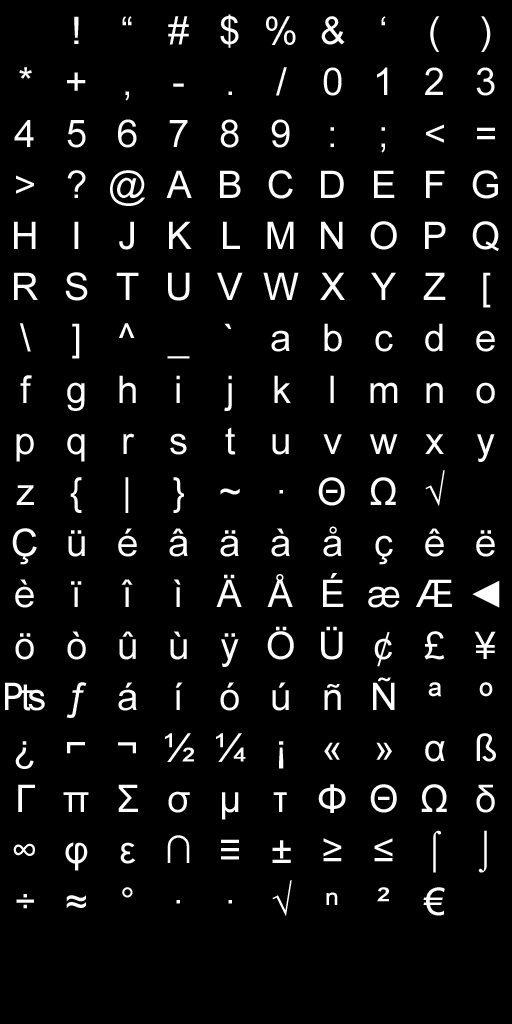
<style>
.page{position:relative;width:512px;height:1024px;background:#000000}
.page>*{position:absolute;margin:0}
.t1{font:38px "ArialMT";color:#ffffff}
</style>
<div class="page">
<p class="t1" style="left:74px;top:16px;width:5px;height:28px">!</p>
<p class="t1" style="left:122px;top:16px;width:10px;height:10px">“</p>
<p class="t1" style="left:168px;top:16px;width:21px;height:29px">#</p>
<p class="t1" style="left:220px;top:14px;width:19px;height:34px">$</p>
<p class="t1" style="left:266px;top:16px;width:30px;height:29px">%</p>
<p class="t1" style="left:321px;top:16px;width:24px;height:29px">&amp;</p>
<p class="t1" style="left:381px;top:16px;width:5px;height:10px">‘</p>
<p class="t1" style="left:430px;top:16px;width:10px;height:36px">(</p>
<p class="t1" style="left:481px;top:16px;width:10px;height:36px">)</p>
<p class="t1" style="left:19px;top:67px;width:13px;height:12px">*</p>
<p class="t1" style="left:67px;top:72px;width:19px;height:19px">+</p>
<p class="t1" style="left:276px;top:67px;width:11px;height:29px">/</p>
<p class="t1" style="left:323px;top:67px;width:19px;height:29px">0</p>
<p class="t1" style="left:377px;top:67px;width:11px;height:28px">1</p>
<p class="t1" style="left:425px;top:67px;width:18px;height:28px">2</p>
<p class="t1" style="left:476px;top:67px;width:19px;height:29px">3</p>
<p class="t1" style="left:173px;top:83px;width:11px;height:4px">-</p>
<p class="t1" style="left:125px;top:91px;width:4px;height:10px">,</p>
<p class="t1" style="left:228px;top:91px;width:4px;height:4px">.</p>
<p class="t1" style="left:14px;top:120px;width:20px;height:27px">4</p>
<p class="t1" style="left:67px;top:120px;width:19px;height:28px">5</p>
<p class="t1" style="left:118px;top:119px;width:19px;height:29px">6</p>
<p class="t1" style="left:169px;top:120px;width:19px;height:27px">7</p>
<p class="t1" style="left:220px;top:119px;width:19px;height:29px">8</p>
<p class="t1" style="left:271px;top:119px;width:19px;height:29px">9</p>
<p class="t1" style="left:426px;top:124px;width:18px;height:19px">&lt;</p>
<p class="t1" style="left:330px;top:127px;width:4px;height:20px">:</p>
<p class="t1" style="left:381px;top:127px;width:4px;height:26px">;</p>
<p class="t1" style="left:477px;top:127px;width:18px;height:13px">=</p>
<p class="t1" style="left:67px;top:170px;width:19px;height:28px">?</p>
<p class="t1" style="left:110px;top:170px;width:35px;height:36px">@</p>
<p class="t1" style="left:166px;top:170px;width:26px;height:28px">A</p>
<p class="t1" style="left:220px;top:170px;width:21px;height:28px">B</p>
<p class="t1" style="left:268px;top:170px;width:25px;height:29px">C</p>
<p class="t1" style="left:321px;top:170px;width:23px;height:28px">D</p>
<p class="t1" style="left:374px;top:170px;width:21px;height:28px">E</p>
<p class="t1" style="left:426px;top:170px;width:19px;height:28px">F</p>
<p class="t1" style="left:472px;top:170px;width:26px;height:29px">G</p>
<p class="t1" style="left:16px;top:175px;width:18px;height:19px">&gt;</p>
<p class="t1" style="left:14px;top:221px;width:22px;height:28px">H</p>
<p class="t1" style="left:74px;top:221px;width:5px;height:28px">I</p>
<p class="t1" style="left:119px;top:221px;width:15px;height:29px">J</p>
<p class="t1" style="left:169px;top:221px;width:23px;height:28px">K</p>
<p class="t1" style="left:223px;top:221px;width:17px;height:28px">L</p>
<p class="t1" style="left:267px;top:221px;width:27px;height:28px">M</p>
<p class="t1" style="left:321px;top:221px;width:22px;height:28px">N</p>
<p class="t1" style="left:370px;top:221px;width:27px;height:29px">O</p>
<p class="t1" style="left:425px;top:221px;width:21px;height:28px">P</p>
<p class="t1" style="left:472px;top:221px;width:27px;height:30px">Q</p>
<p class="t1" style="left:14px;top:272px;width:24px;height:28px">R</p>
<p class="t1" style="left:65px;top:272px;width:23px;height:29px">S</p>
<p class="t1" style="left:116px;top:272px;width:23px;height:28px">T</p>
<p class="t1" style="left:168px;top:272px;width:22px;height:29px">U</p>
<p class="t1" style="left:217px;top:272px;width:26px;height:28px">V</p>
<p class="t1" style="left:263px;top:272px;width:36px;height:28px">W</p>
<p class="t1" style="left:320px;top:272px;width:25px;height:28px">X</p>
<p class="t1" style="left:371px;top:272px;width:25px;height:28px">Y</p>
<p class="t1" style="left:423px;top:272px;width:23px;height:28px">Z</p>
<p class="t1" style="left:483px;top:272px;width:8px;height:36px">[</p>
<p class="t1" style="left:20px;top:323px;width:11px;height:29px">\</p>
<p class="t1" style="left:72px;top:323px;width:8px;height:36px">]</p>
<p class="t1" style="left:119px;top:323px;width:16px;height:15px">^</p>
<p class="t1" style="left:224px;top:323px;width:8px;height:6px">`</p>
<p class="t1" style="left:324px;top:323px;width:18px;height:29px">b</p>
<p class="t1" style="left:425px;top:323px;width:18px;height:29px">d</p>
<p class="t1" style="left:271px;top:330px;width:19px;height:22px">a</p>
<p class="t1" style="left:375px;top:330px;width:18px;height:22px">c</p>
<p class="t1" style="left:476px;top:330px;width:19px;height:22px">e</p>
<p class="t1" style="left:167px;top:356px;width:23px;height:3px">_</p>
<p class="t1" style="left:20px;top:375px;width:12px;height:28px">f</p>
<p class="t1" style="left:119px;top:375px;width:17px;height:28px">h</p>
<p class="t1" style="left:176px;top:375px;width:4px;height:28px">i</p>
<p class="t1" style="left:224px;top:375px;width:8px;height:36px">j</p>
<p class="t1" style="left:274px;top:375px;width:17px;height:28px">k</p>
<p class="t1" style="left:330px;top:375px;width:4px;height:28px">l</p>
<p class="t1" style="left:67px;top:382px;width:18px;height:29px">g</p>
<p class="t1" style="left:370px;top:382px;width:28px;height:21px">m</p>
<p class="t1" style="left:426px;top:382px;width:17px;height:21px">n</p>
<p class="t1" style="left:476px;top:382px;width:19px;height:22px">o</p>
<p class="t1" style="left:16px;top:433px;width:18px;height:29px">p</p>
<p class="t1" style="left:67px;top:433px;width:18px;height:29px">q</p>
<p class="t1" style="left:123px;top:433px;width:12px;height:21px">r</p>
<p class="t1" style="left:170px;top:433px;width:17px;height:22px">s</p>
<p class="t1" style="left:225px;top:427px;width:11px;height:28px">t</p>
<p class="t1" style="left:272px;top:434px;width:17px;height:21px">u</p>
<p class="t1" style="left:323px;top:434px;width:19px;height:20px">v</p>
<p class="t1" style="left:370px;top:434px;width:28px;height:20px">w</p>
<p class="t1" style="left:425px;top:434px;width:19px;height:20px">x</p>
<p class="t1" style="left:477px;top:434px;width:18px;height:28px">y</p>
<p class="t1" style="left:425px;top:470px;width:20px;height:37px">√</p>
<p class="t1" style="left:16px;top:485px;width:18px;height:20px">z</p>
<p class="t1" style="left:70px;top:477px;width:12px;height:36px">{</p>
<p class="t1" style="left:125px;top:477px;width:4px;height:36px">|</p>
<p class="t1" style="left:173px;top:477px;width:11px;height:36px">}</p>
<p class="t1" style="left:318px;top:477px;width:27px;height:29px">Θ</p>
<p class="t1" style="left:370px;top:477px;width:26px;height:28px">Ω</p>
<p class="t1" style="left:220px;top:488px;width:20px;height:7px">~</p>
<p class="t1" style="left:279px;top:490px;width:4px;height:4px">·</p>
<p class="t1" style="left:12px;top:528px;width:25px;height:37px">Ç</p>
<p class="t1" style="left:68px;top:530px;width:17px;height:27px">ü</p>
<p class="t1" style="left:118px;top:528px;width:19px;height:29px">é</p>
<p class="t1" style="left:169px;top:528px;width:19px;height:29px">â</p>
<p class="t1" style="left:220px;top:530px;width:19px;height:27px">ä</p>
<p class="t1" style="left:271px;top:528px;width:19px;height:29px">à</p>
<p class="t1" style="left:323px;top:526px;width:19px;height:31px">å</p>
<p class="t1" style="left:425px;top:528px;width:19px;height:29px">ê</p>
<p class="t1" style="left:476px;top:530px;width:19px;height:27px">ë</p>
<p class="t1" style="left:375px;top:535px;width:18px;height:30px">ç</p>
<p class="t1" style="left:15px;top:579px;width:19px;height:29px">è</p>
<p class="t1" style="left:71px;top:581px;width:11px;height:26px">ï</p>
<p class="t1" style="left:121px;top:579px;width:12px;height:28px">î</p>
<p class="t1" style="left:173px;top:579px;width:8px;height:28px">ì</p>
<p class="t1" style="left:216px;top:574px;width:26px;height:33px">Ä</p>
<p class="t1" style="left:267px;top:574px;width:26px;height:33px">Å</p>
<p class="t1" style="left:323px;top:573px;width:21px;height:34px">É</p>
<p class="t1" style="left:416px;top:579px;width:36px;height:28px">Æ</p>
<p class="t1" style="left:472px;top:580px;width:28px;height:28px">◄</p>
<p class="t1" style="left:368px;top:586px;width:32px;height:22px">æ</p>
<p class="t1" style="left:267px;top:626px;width:27px;height:34px">Ö</p>
<p class="t1" style="left:321px;top:626px;width:22px;height:34px">Ü</p>
<p class="t1" style="left:15px;top:633px;width:19px;height:27px">ö</p>
<p class="t1" style="left:67px;top:631px;width:19px;height:29px">ò</p>
<p class="t1" style="left:119px;top:631px;width:17px;height:29px">û</p>
<p class="t1" style="left:170px;top:631px;width:17px;height:29px">ù</p>
<p class="t1" style="left:221px;top:633px;width:18px;height:34px">ÿ</p>
<p class="t1" style="left:374px;top:631px;width:18px;height:36px">¢</p>
<p class="t1" style="left:424px;top:631px;width:21px;height:29px">£</p>
<p class="t1" style="left:474px;top:631px;width:22px;height:28px">¥</p>
<p class="t1" style="left:373px;top:677px;width:22px;height:33px">Ñ</p>
<p class="t1" style="left:5px;top:682px;width:40px;height:29px">₧</p>
<p class="t1" style="left:66px;top:682px;width:21px;height:36px">ƒ</p>
<p class="t1" style="left:118px;top:682px;width:19px;height:29px">á</p>
<p class="t1" style="left:175px;top:682px;width:8px;height:28px">í</p>
<p class="t1" style="left:220px;top:682px;width:19px;height:29px">ó</p>
<p class="t1" style="left:272px;top:682px;width:17px;height:29px">ú</p>
<p class="t1" style="left:324px;top:684px;width:17px;height:26px">ñ</p>
<p class="t1" style="left:428px;top:682px;width:14px;height:15px">ª</p>
<p class="t1" style="left:479px;top:682px;width:14px;height:15px">º</p>
<p class="t1" style="left:165px;top:733px;width:29px;height:29px">½</p>
<p class="t1" style="left:216px;top:733px;width:30px;height:29px">¼</p>
<p class="t1" style="left:476px;top:733px;width:20px;height:29px">ß</p>
<p class="t1" style="left:15px;top:741px;width:19px;height:28px">¿</p>
<p class="t1" style="left:67px;top:742px;width:18px;height:12px">⌐</p>
<p class="t1" style="left:118px;top:742px;width:18px;height:12px">¬</p>
<p class="t1" style="left:279px;top:741px;width:5px;height:28px">¡</p>
<p class="t1" style="left:324px;top:742px;width:16px;height:18px">«</p>
<p class="t1" style="left:376px;top:742px;width:16px;height:18px">»</p>
<p class="t1" style="left:425px;top:740px;width:20px;height:22px">α</p>
<p class="t1" style="left:18px;top:784px;width:17px;height:28px">Γ</p>
<p class="t1" style="left:118px;top:784px;width:20px;height:28px">Σ</p>
<p class="t1" style="left:318px;top:784px;width:28px;height:29px">Φ</p>
<p class="t1" style="left:370px;top:784px;width:27px;height:29px">Θ</p>
<p class="t1" style="left:421px;top:784px;width:26px;height:28px">Ω</p>
<p class="t1" style="left:476px;top:784px;width:19px;height:29px">δ</p>
<p class="t1" style="left:63px;top:792px;width:26px;height:20px">π</p>
<p class="t1" style="left:168px;top:791px;width:22px;height:22px">σ</p>
<p class="t1" style="left:222px;top:792px;width:17px;height:28px">µ</p>
<p class="t1" style="left:273px;top:792px;width:14px;height:20px">τ</p>
<p class="t1" style="left:433px;top:830px;width:8px;height:43px">⌠</p>
<p class="t1" style="left:478px;top:830px;width:9px;height:43px">⌡</p>
<p class="t1" style="left:13px;top:843px;width:22px;height:13px">∞</p>
<p class="t1" style="left:65px;top:842px;width:23px;height:29px">φ</p>
<p class="t1" style="left:120px;top:842px;width:16px;height:22px">ε</p>
<p class="t1" style="left:167px;top:835px;width:23px;height:28px">∩</p>
<p class="t1" style="left:221px;top:839px;width:18px;height:21px">≡</p>
<p class="t1" style="left:272px;top:840px;width:19px;height:23px">±</p>
<p class="t1" style="left:323px;top:838px;width:19px;height:24px">≥</p>
<p class="t1" style="left:374px;top:838px;width:19px;height:24px">≤</p>
<p class="t1" style="left:272px;top:880px;width:20px;height:37px">√</p>
<p class="t1" style="left:16px;top:894px;width:18px;height:15px">÷</p>
<p class="t1" style="left:122px;top:887px;width:11px;height:11px">°</p>
<p class="t1" style="left:326px;top:892px;width:12px;height:13px">ⁿ</p>
<p class="t1" style="left:377px;top:887px;width:12px;height:15px">²</p>
<p class="t1" style="left:423px;top:887px;width:22px;height:29px">€</p>
<p class="t1" style="left:66px;top:895px;width:20px;height:13px">≈</p>
<p class="t1" style="left:176px;top:900px;width:4px;height:4px">∙</p>
<p class="t1" style="left:228px;top:900px;width:4px;height:4px">·</p>
</div>
